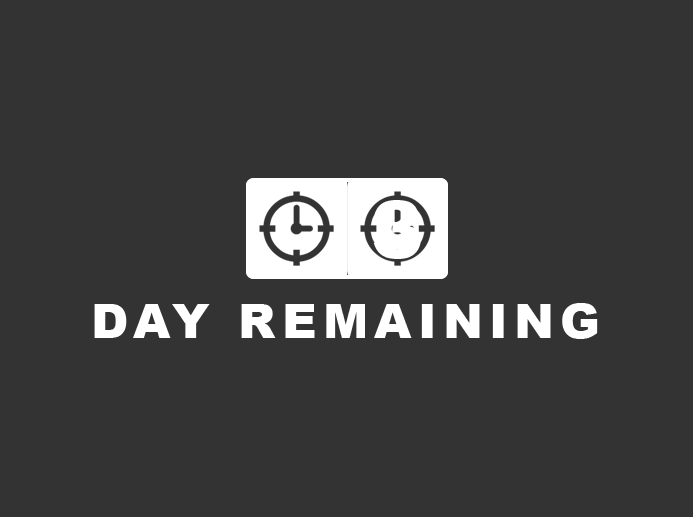
<style>
.page{position:relative;width:693px;height:517px;background:#333333}
.page>*{position:absolute;margin:0}
.t1{font:79.9px "Arial-Black";letter-spacing:0.25em;color:#ffffff}
.t2{font:48px "Arial-Black";letter-spacing:0.13em;color:#ffffff}
</style>
<div class="page">
<p class="t1" style="left:373px;top:200px;width:48px;height:59px">3</p>
<p class="t2" style="left:94px;top:303px;width:504px;height:36px">DAY REMAINING</p>
</div>
